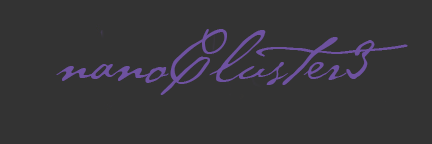
<style>
.page{position:relative;width:432px;height:144px;background:#333333}
.page>*{position:absolute;margin:0}
.t1{font:72px "P22CezanneRegular";color:#6e52a0}
</style>
<div class="page">
<p class="t1" style="left:56px;top:29px;width:352px;height:66px">nanoCluster3</p>
</div>
